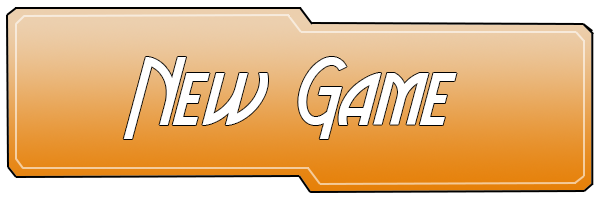
<style>
.page{position:relative;width:600px;height:200px;background:#ffffff}
.page>*{position:absolute;margin:0}
.t1{font:100px "AeroviasBrasilNF";color:#ffffff}
</style>
<div class="page">
<p class="t1" style="left:123px;top:57px;width:334px;height:82px">New Game</p>
</div>
